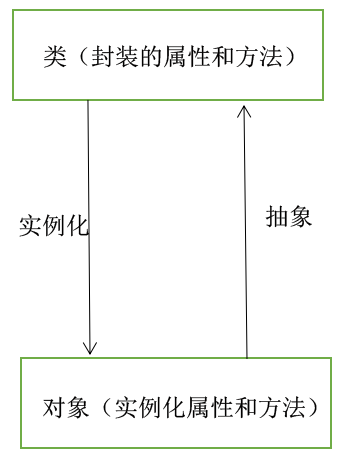
<style>
.page{position:relative;width:345px;height:457px;background:#ffffff}
.page>*{position:absolute;margin:0}
.t1{font:24px "SimSun";color:#010000}
</style>
<div class="page">
<p class="t1" style="left:44px;top:45px;width:250px;height:23px">类（封装的属性和方法）</p>
<p class="t1" style="left:265px;top:205px;width:47px;height:23px">抽象</p>
<p class="t1" style="left:19px;top:214px;width:70px;height:23px">实例化</p>
<p class="t1" style="left:43px;top:396px;width:274px;height:23px">对象（实例化属性和方法）</p>
</div>
